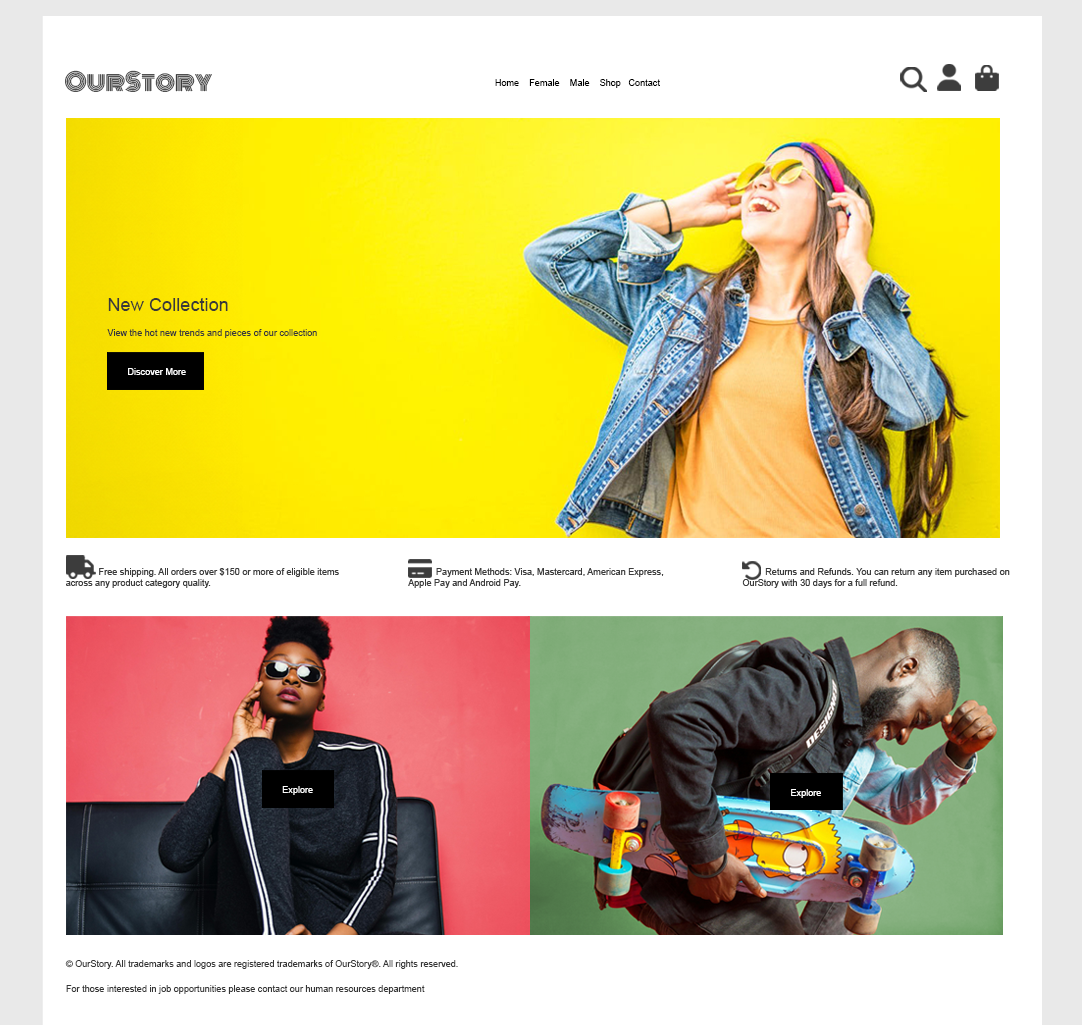
<style>
.page{position:relative;width:1082px;height:1025px;background:#ffffff}
.page>*{position:absolute;margin:0}
.t1{font:23.7px "Monoton-Regular";color:#3c3c3c}
.t2{font:9.1px "ArialMT";color:#000000}
.t3{font:18.2px "ArialMT";color:#393939}
.t4{font:9.1px "ArialMT";color:#393939}
.t5{font:9.1px "ArialMT";color:#fefefe}
.t6{font:9.1px "ArialMT";color:#3c3c3c}
.t7{font:9.1px "ArialMT";color:#363636}
</style>
<div class="page">
<p class="t1" style="left:65px;top:70px;width:147px;height:22px">OurStory</p>
<p class="t2" style="left:495px;top:79px;width:165px;height:9px">Home    Female    Male    Shop   Contact</p>
<p class="t3" style="left:108px;top:298px;width:120px;height:13px">New Collection</p>
<p class="t4" style="left:107px;top:329px;width:210px;height:9px">View the hot new trends and pieces of our collection</p>
<p class="t5" style="left:128px;top:368px;width:58px;height:7px">Discover More</p>
<p class="t6" style="left:66px;top:568px;width:273px;height:20px">Free shipping. All orders over $150 or more of eligible items across any product category quality.</p>
<p class="t6" style="left:408px;top:568px;width:256px;height:20px">Payment Methods: Visa, Mastercard, American Express, Apple Pay and Android Pay.</p>
<p class="t6" style="left:742px;top:568px;width:268px;height:20px">Returns and Refunds. You can return any item purchased on OurStory with 30 days for a full refund.</p>
<p class="t5" style="left:282px;top:786px;width:31px;height:9px">Explore</p>
<p class="t5" style="left:791px;top:789px;width:30px;height:9px">Explore</p>
<p class="t7" style="left:65px;top:960px;width:393px;height:9px">© OurStory. All trademarks and logos are registered trademarks of OurStory®. All rights reserved.</p>
<p class="t7" style="left:66px;top:985px;width:359px;height:9px">For those interested in job opportunities please contact our human resources department</p>
</div>
